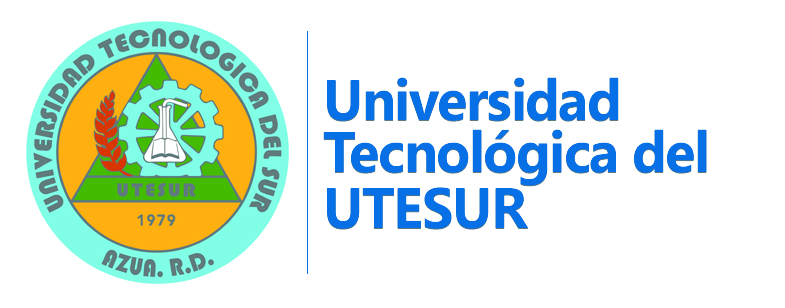
<style>
.page{position:relative;width:785px;height:308px;background:#ffffff}
.page>*{position:absolute;margin:0}
.t1{font:57.1px "LeelawadeeUI-Bold";letter-spacing:-0.025em;color:#076adb}
</style>
<div class="page">
<p class="t1" style="left:327px;top:77px;width:292px;height:44px">Universidad</p>
<p class="t1" style="left:323px;top:129px;width:384px;height:57px">Tecnológica del Sur</p>
<p class="t1" style="left:327px;top:187px;width:202px;height:42px">UTESUR</p>
</div>
